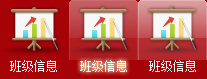
<style>
.page{position:relative;width:207px;height:79px;background:#a60308}
.page>*{position:absolute;margin:0}
.t1{font:12px "NSimSun";color:#fdfafa}
</style>
<div class="page">
<p class="t1" style="left:10px;top:60px;width:47px;height:12px">班级信息</p>
<p class="t1" style="left:80px;top:60px;width:47px;height:12px">班级信息</p>
<p class="t1" style="left:149px;top:60px;width:47px;height:12px">班级信息</p>
</div>
